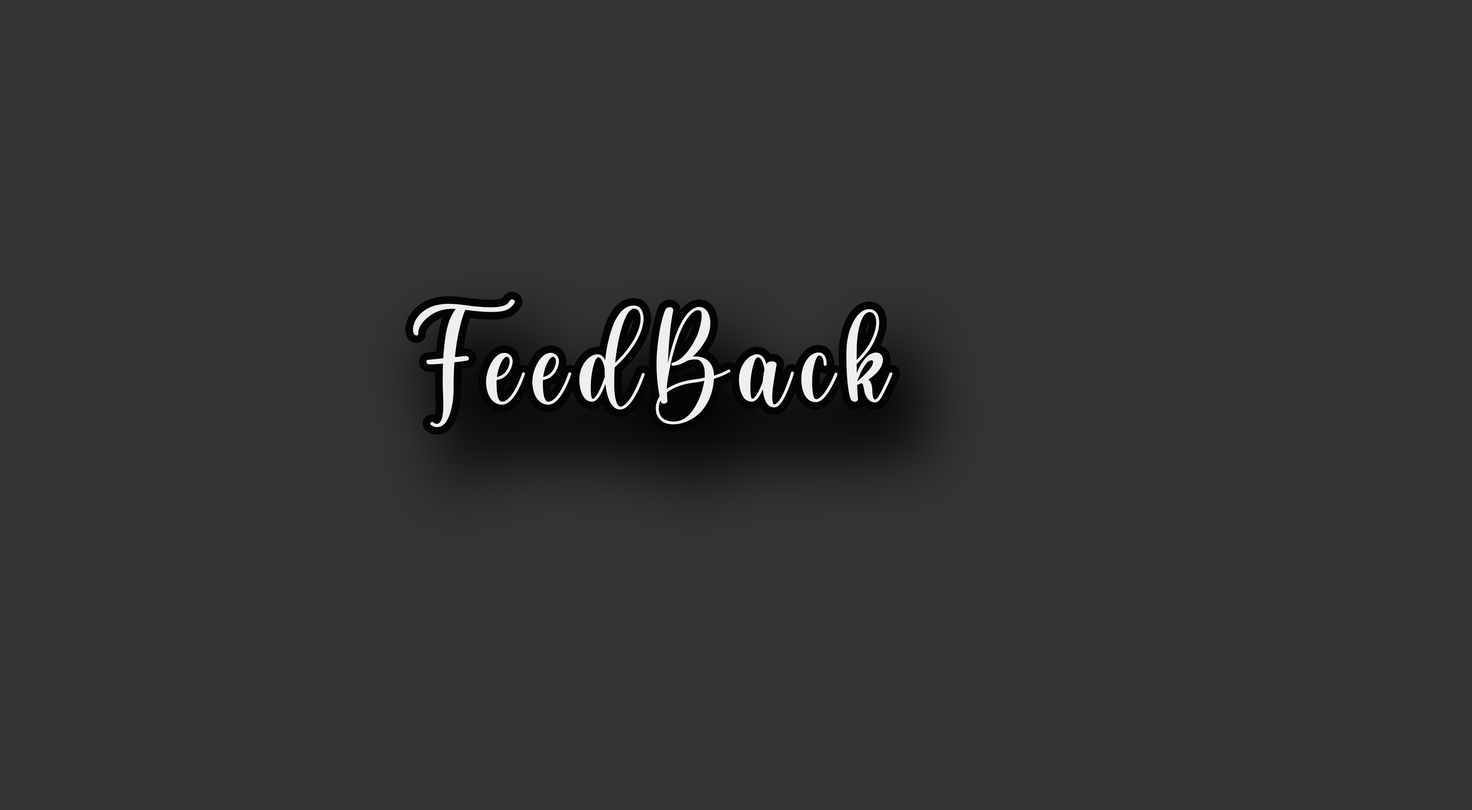
<style>
.page{position:relative;width:1472px;height:810px;background:#333333}
.page>*{position:absolute;margin:0}
.t1{font:172.7px "SouthCalistoga_PERSONALUSE";letter-spacing:0.075em;color:#ffffff}
</style>
<div class="page">
<p class="t1" style="left:413px;top:299px;width:479px;height:128px;opacity:0.92">FeedBack</p>
</div>
